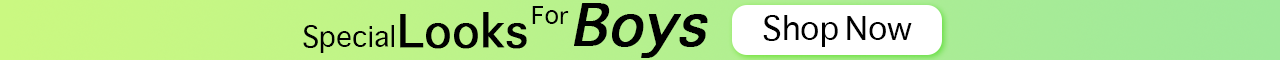
<style>
.page{position:relative;width:1280px;height:60px}
.page>*{position:absolute;margin:0}
.t1{font:24px "Sathu";color:#000000}
.t2{font:56px "Sathu";color:#000000;font-weight:bold;font-style:italic}
.t3{font:44px "Sathu";color:#000000;font-weight:bold}
.t4{font:32px "Sathu";color:#000000}
.t5{font:28px "Sathu";color:#000000}
</style>
<div class="page">
<p class="t1" style="left:532px;top:6px;width:37px;height:18px">For</p>
<p class="t2" style="left:574px;top:3px;width:134px;height:55px">Boys</p>
<p class="t3" style="left:400px;top:12px;width:127px;height:37px">Looks</p>
<p class="t4" style="left:763px;top:15px;width:149px;height:32px">Shop Now</p>
<p class="t5" style="left:303px;top:25px;width:91px;height:28px">Special</p>
</div>
